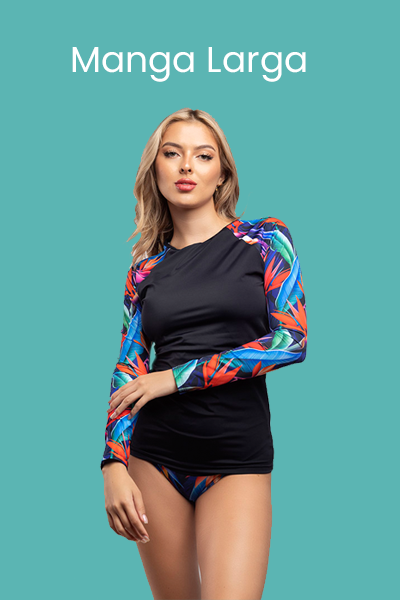
<style>
.page{position:relative;width:400px;height:600px;background:#5bb5b3}
.page>*{position:absolute;margin:0}
.t1{font:36px "Poppins-Regular";color:#ffffff}
</style>
<div class="page">
<p class="t1" style="left:72px;top:47px;width:234px;height:35px">Manga Larga</p>
</div>
